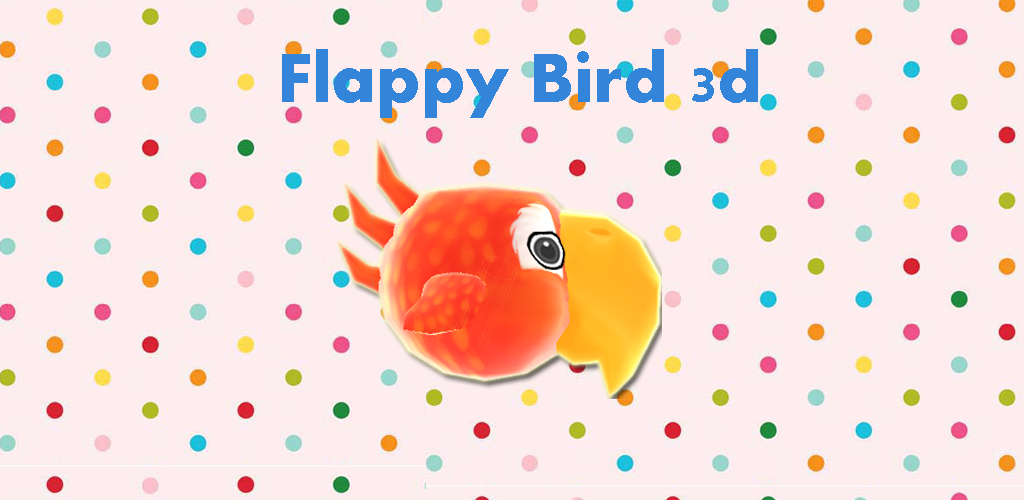
<style>
.page{position:relative;width:1024px;height:500px;background:#fdedee}
.page>*{position:absolute;margin:0}
.t1{font:72px "Aharoni-Bold";color:#3385d9}
</style>
<div class="page">
<p class="t1" style="left:282px;top:49px;width:476px;height:69px">Flappy Bird 3d</p>
</div>
